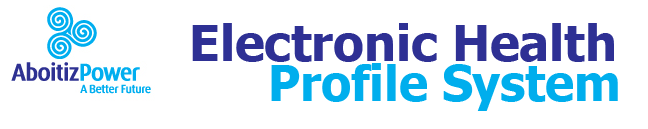
<style>
.page{position:relative;width:648px;height:129px;background:#ffffff}
.page>*{position:absolute;margin:0}
.t1{font:49.9px "Tahoma-Bold";color:#2e3094}
.t2{font:48.5px "Tahoma-Bold";color:#00aeed}
</style>
<div class="page">
<p class="t1" style="left:192px;top:23px;width:422px;height:39px">Electronic Health</p>
<p class="t2" style="left:271px;top:63px;width:347px;height:48px">Profile System</p>
</div>
